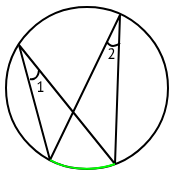
<style>
.page{position:relative;width:174px;height:176px;background:#ffffff}
.page>*{position:absolute;margin:0}
.t1{font:15.2px "PTSans-Regular";color:#000000}
</style>
<div class="page">
<p class="t1" style="left:108px;top:48px;width:7px;height:11px">2</p>
<p class="t1" style="left:37px;top:81px;width:7px;height:11px">1</p>
</div>
